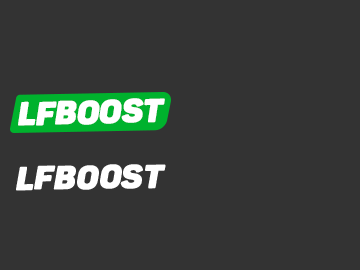
<style>
.page{position:relative;width:360px;height:270px;background:#333333}
.page>*{position:absolute;margin:0}
.t1{font:32.3px "Panton-BlackitalicCaps";letter-spacing:-0.01em;color:#ffffff;font-weight:bold}
.t2{font:32.6px "Panton-BlackitalicCaps";letter-spacing:-0.01em;color:#ffffff;font-weight:bold}
</style>
<div class="page">
<p class="t1" style="left:18px;top:98px;width:147px;height:28px;rotate:-1deg">LFBOOST</p>
<p class="t2" style="left:16px;top:164px;width:150px;height:27px;rotate:-1deg">LFBOOST</p>
</div>
